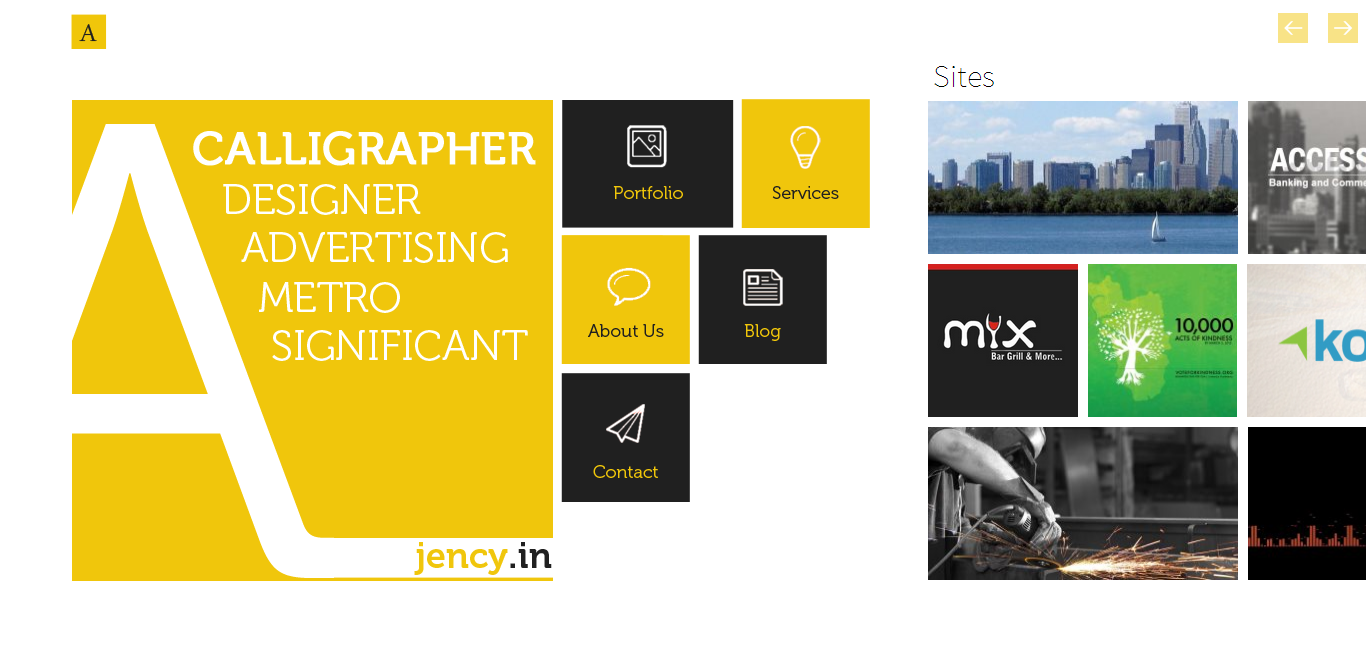
<style>
.page{position:relative;width:1366px;height:654px;background:#ffffff}
.page>*{position:absolute;margin:0}
.t1{font:35px "DaunPenh";color:#202020}
.t2{font:45px "Museo-500";color:#ffffff;text-transform:uppercase;font-weight:bold}
.t3{font:42px "Museo-300";color:#ffffff;text-transform:uppercase}
.t4{font:18px "Museo-300";color:#f0c60a}
.t5{font:18px "Museo-300";color:#202020}
.t6{font:36px "Museo-700";color:#f0c60c}
.t7{font:36px "Museo-700";color:#202020}
</style>
<div class="page">
<p class="t1" style="left:79px;top:24px;width:18px;height:18px">A</p>
<p class="t2" style="left:193px;top:131px;width:343px;height:35px">Calligrapher</p>
<p class="t3" style="left:223px;top:184px;width:198px;height:31px">designer</p>
<p class="t4" style="left:613px;top:186px;width:70px;height:13px">Portfolio</p>
<p class="t5" style="left:772px;top:186px;width:67px;height:13px">Services</p>
<p class="t3" style="left:241px;top:232px;width:267px;height:31px">advertising</p>
<p class="t3" style="left:259px;top:282px;width:141px;height:31px">Metro</p>
<p class="t5" style="left:588px;top:324px;width:76px;height:13px">About Us</p>
<p class="t4" style="left:744px;top:324px;width:37px;height:17px">Blog</p>
<p class="t3" style="left:272px;top:330px;width:256px;height:31px">significant</p>
<p class="t4" style="left:593px;top:465px;width:65px;height:13px">Contact</p>
<p class="t6" style="left:414px;top:542px;width:138px;height:33px">jency<span class="t7">.in</span></p>
</div>
